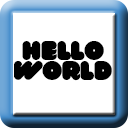
<style>
.page{position:relative;width:128px;height:128px;background:#ffffff}
.page>*{position:absolute;margin:0}
.t1{font:26.4px/19.2px "VAL";color:#000000}
</style>
<div class="page">
<p class="t1" style="left:14px;top:41px;width:98px;height:40px;text-align:center">Hello<br>World</p>
</div>
